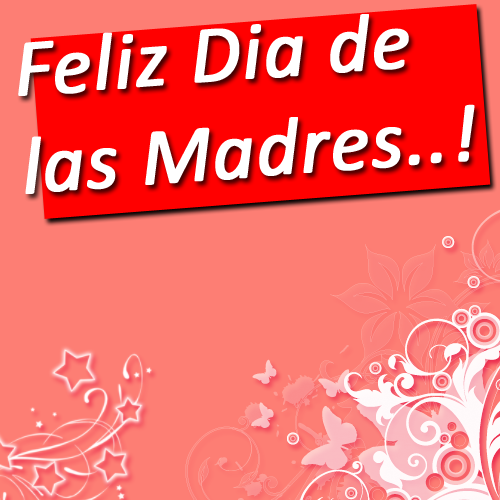
<style>
.page{position:relative;width:500px;height:500px;background:#fd7e74}
.page>*{position:absolute;margin:0}
.t1{font:81.4px "Calibri-Italic";color:#ffffff;font-weight:bold}
</style>
<div class="page">
<p class="t1" style="left:18px;top:14px;width:457px;height:180px;rotate:-4deg">Feliz Dia de<br>las Madres..!</p>
</div>
